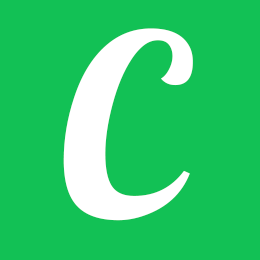
<style>
.page{position:relative;width:260px;height:260px;background:#12c155}
.page>*{position:absolute;margin:0}
.t1{font:250px "Lobster";color:#ffffff}
</style>
<div class="page">
<p class="t1" style="left:63px;top:28px;width:130px;height:193px">C</p>
</div>
